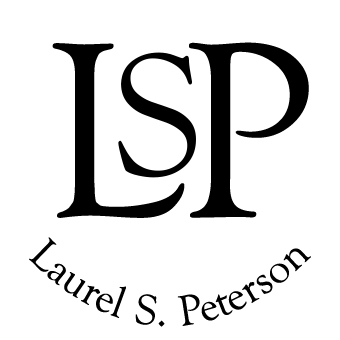
<style>
.page{position:relative;width:340px;height:340px;background:#ffffff}
.page>*{position:absolute;margin:0}
.t1{font:257.6px "Goudy-Old-Style-Normal";letter-spacing:0.025em;color:#000000}
.t2{font:257.6px "Goudy-Old-Style-Normal";color:#000000}
.t3{font:180.3px "Goudy-Old-Style-Normal";color:#000000}
.t4{font:44px "Goudy-Old-Style-Normal";letter-spacing:0.02em;color:#000000}
.t5{font:34px "Goudy-Old-Style-Normal";letter-spacing:0.02em;color:#000000}
.t6{font:44px "Goudy-Old-Style-Normal";letter-spacing:0.05em;color:#000000}
</style>
<div class="page">
<p class="t1" style="left:52px;top:42px;width:257px;height:176px">L<span class="t2">P</span></p>
<p class="t3" style="left:118px;top:52px;width:78px;height:126px">S</p>
<p class="t4" style="left:29px;top:237px;width:282px;height:90px"><span class="t5">   </span><span class="t6">L</span>aurel S. Peterson</p>
</div>
